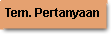
<style>
.page{position:relative;width:111px;height:34px;background:#e5a170}
.page>*{position:absolute;margin:0}
.t1{font:12px "Arial-BoldMT";color:#000000}
</style>
<div class="page">
<p class="t1" style="left:5px;top:8px;width:94px;height:11px">Tem. Pertanyaan</p>
</div>
